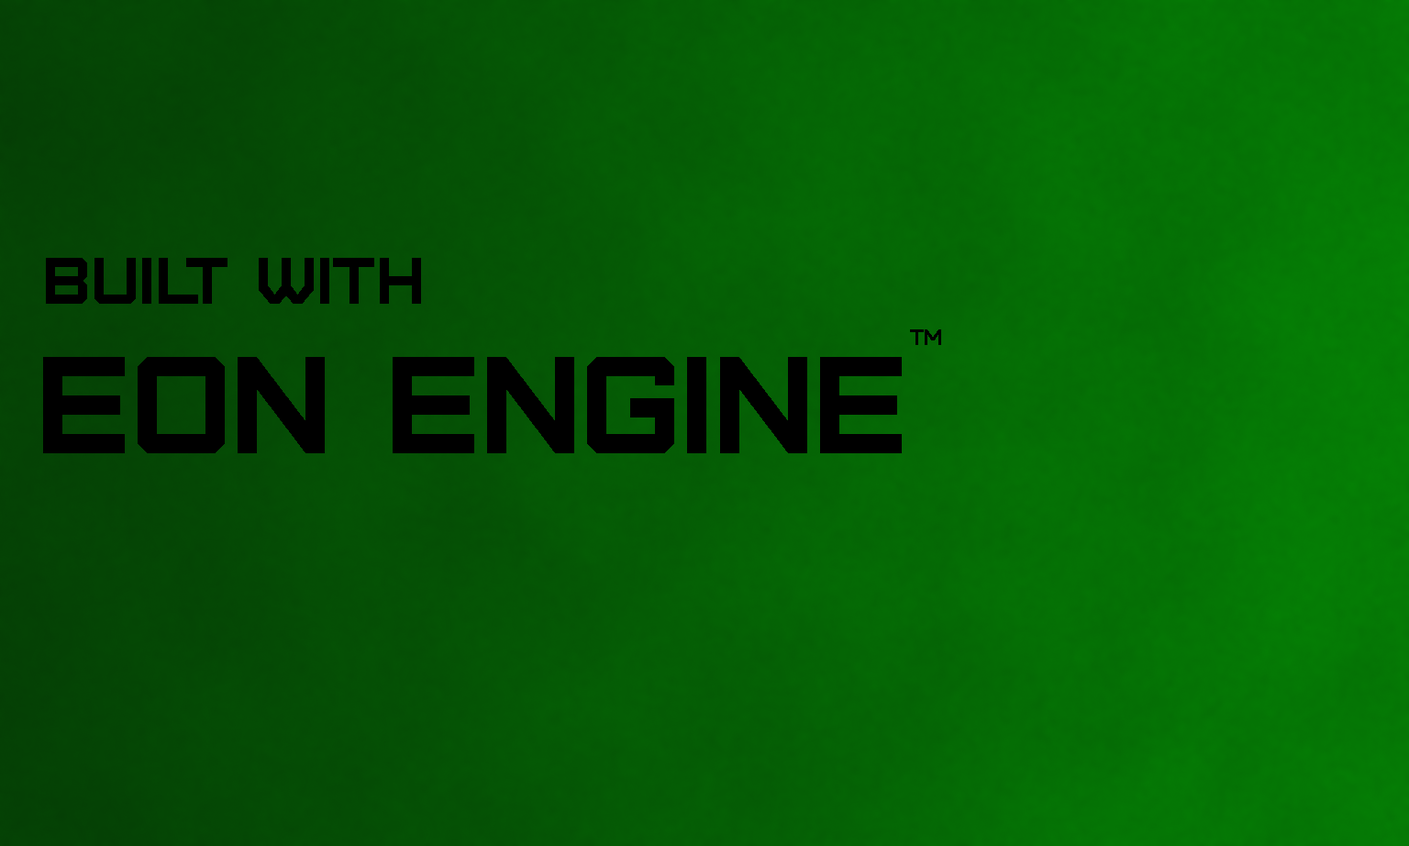
<style>
.page{position:relative;width:1409px;height:846px}
.page>*{position:absolute;margin:0}
.t1{font:66.1px "Furore";color:#000000}
.t2{font:22px "Furore";color:#000000}
.t3{font:137.6px "Furore";color:#000000}
</style>
<div class="page">
<p class="t1" style="left:46px;top:258px;width:375px;height:46px">Built with</p>
<p class="t2" style="left:910px;top:329px;width:31px;height:16px">tm</p>
<p class="t3" style="left:43px;top:357px;width:859px;height:96px">Eon Engine</p>
</div>
